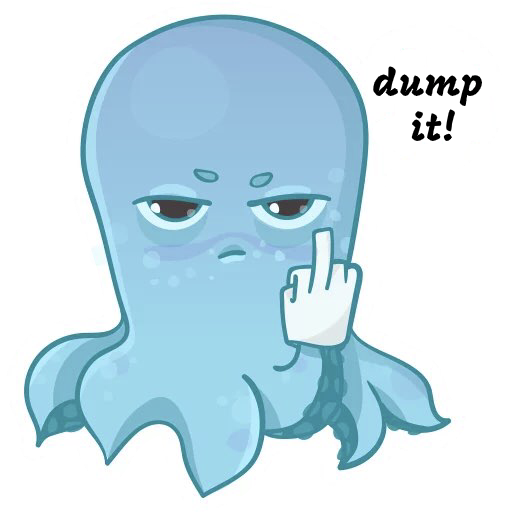
<style>
.page{position:relative;width:512px;height:512px;background:#ffffff}
.page>*{position:absolute;margin:0}
.t1{font:38px "Mogra-Regular";color:#000000}
</style>
<div class="page">
<p class="t1" style="left:373px;top:66px;width:109px;height:75px;text-align:center">dump <br>it!</p>
</div>
